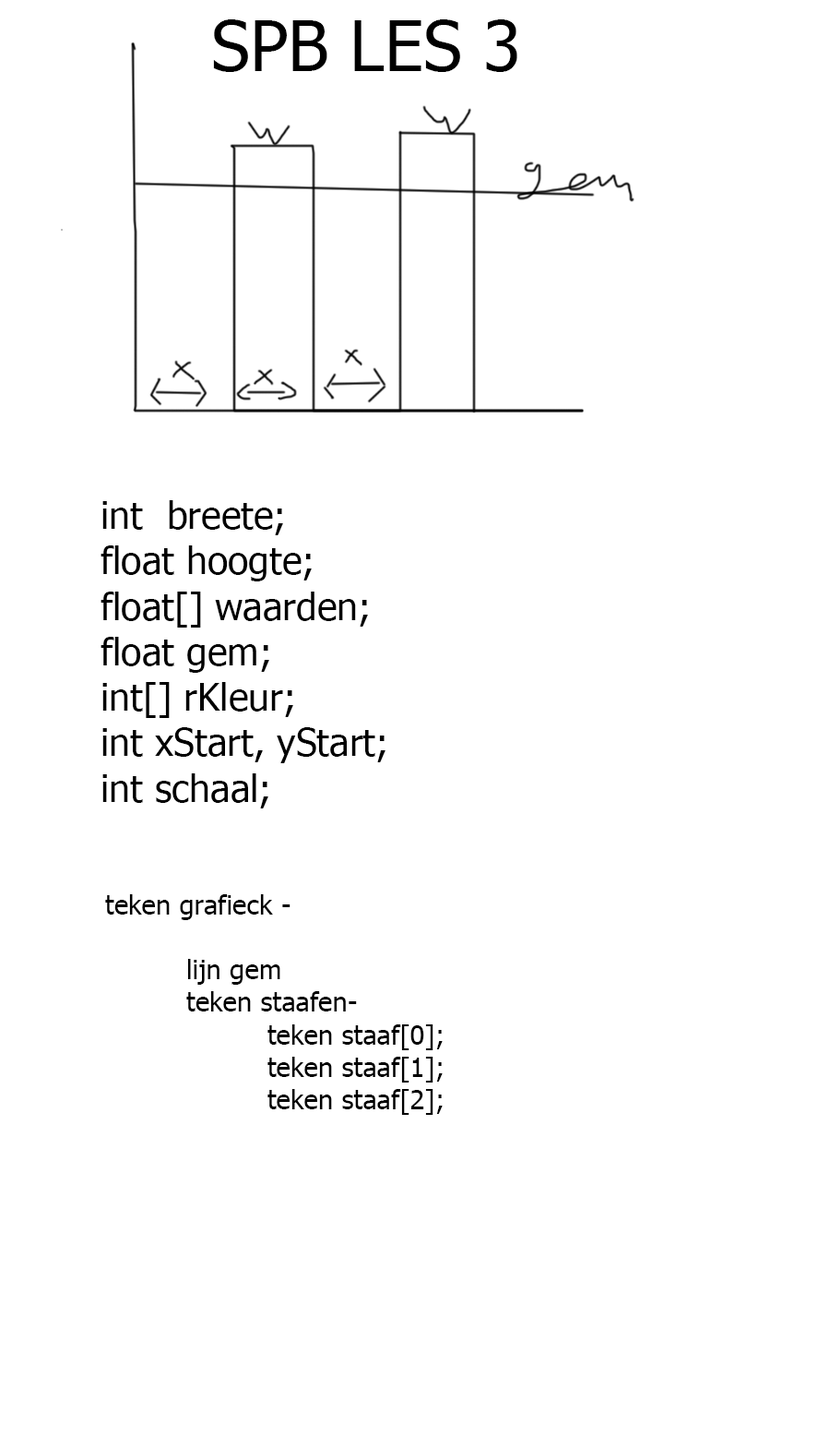
<style>
.page{position:relative;width:830px;height:1436px;background:#ffffff}
.page>*{position:absolute;margin:0}
.t1{font:68.9px "Tahoma";color:#000000}
.t2{font:37.9px "Tahoma";color:#000000}
.t3{font:27.1px "Tahoma";color:#000000}
</style>
<div class="page">
<p class="t1" style="left:213px;top:19px;width:305px;height:53px">SPB LES 3</p>
<p class="t2" style="left:101px;top:500px;width:285px;height:308px">int  breete;<br>float hoogte;<br>float[] waarden;<br>float gem;<br>int[] rKleur;<br>int xStart, yStart;<br>int schaal;</p>
<p class="t3" style="left:105px;top:894px;width:338px;height:221px">teken grafieck -<br><br> lijn gem<br> teken staafen-<br>  teken staaf[0];<br>  teken staaf[1];<br>  teken staaf[2];</p>
</div>
